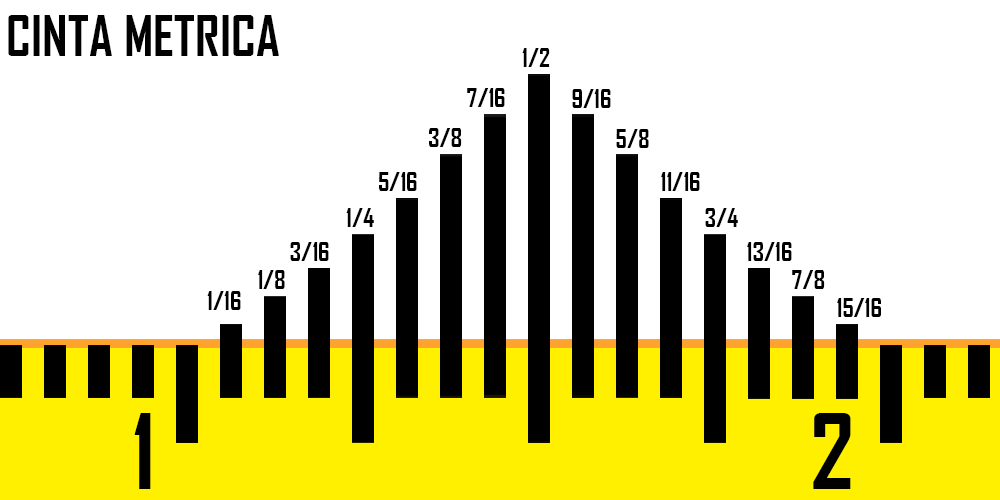
<style>
.page{position:relative;width:1000px;height:500px;background:#ffffff}
.page>*{position:absolute;margin:0}
.t1{font:53.4px "AgencyFB-Bold";color:#010101}
.t2{font:25px "AgencyFB-Bold";color:#000000}
.t3{font:100px "AgencyFB-Bold";color:#000000}
</style>
<div class="page">
<p class="t1" style="left:8px;top:15px;width:271px;height:41px">CINTA METRICA</p>
<p class="t2" style="left:522px;top:48px;width:28px;height:19px">1/2</p>
<p class="t2" style="left:467px;top:88px;width:38px;height:19px">7/16</p>
<p class="t2" style="left:572px;top:89px;width:39px;height:19px">9/16</p>
<p class="t2" style="left:429px;top:128px;width:33px;height:19px">3/8</p>
<p class="t2" style="left:616px;top:129px;width:33px;height:19px">5/8</p>
<p class="t2" style="left:379px;top:172px;width:38px;height:19px">5/16</p>
<p class="t2" style="left:661px;top:172px;width:39px;height:19px">11/16</p>
<p class="t2" style="left:346px;top:208px;width:28px;height:19px">1/4</p>
<p class="t2" style="left:705px;top:208px;width:33px;height:19px">3/4</p>
<p class="t2" style="left:290px;top:242px;width:39px;height:19px">3/16</p>
<p class="t2" style="left:747px;top:242px;width:45px;height:19px">13/16</p>
<p class="t2" style="left:258px;top:270px;width:27px;height:19px">1/8</p>
<p class="t2" style="left:792px;top:270px;width:33px;height:19px">7/8</p>
<p class="t2" style="left:207px;top:291px;width:34px;height:19px"><span class="t3">  </span>1/16</p>
<p class="t2" style="left:837px;top:298px;width:44px;height:19px">15/16</p>
<p class="t3" style="left:134px;top:413px;width:17px;height:76px">1</p>
<p class="t3" style="left:813px;top:413px;width:38px;height:76px">2</p>
</div>
